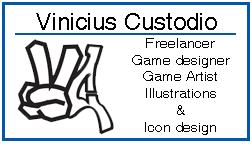
<style>
.page{position:relative;width:252px;height:144px;background:#ffffff}
.page>*{position:absolute;margin:0}
.t1{font:24px "Helvetica";color:#000000}
.t2{font:14px "Helvetica";color:#000000}
</style>
<div class="page">
<p class="t1" style="left:36px;top:13px;width:181px;height:17px">Vinicius Custodio</p>
<p class="t2" style="left:132px;top:38px;width:98px;height:97px;text-align:center">Freelancer<br>Game designer<br>Game Artist<br>Illustrations<br>&amp;<br>Icon design</p>
</div>
